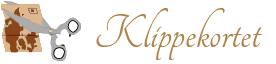
<style>
.page{position:relative;width:276px;height:64px;background:#ffffff}
.page>*{position:absolute;margin:0}
.t1{font:52px "Tangerine-Regular";color:#af8447}
</style>
<div class="page">
<p class="t1" style="left:96px;top:8px;width:166px;height:52px">Klippekortet</p>
</div>
